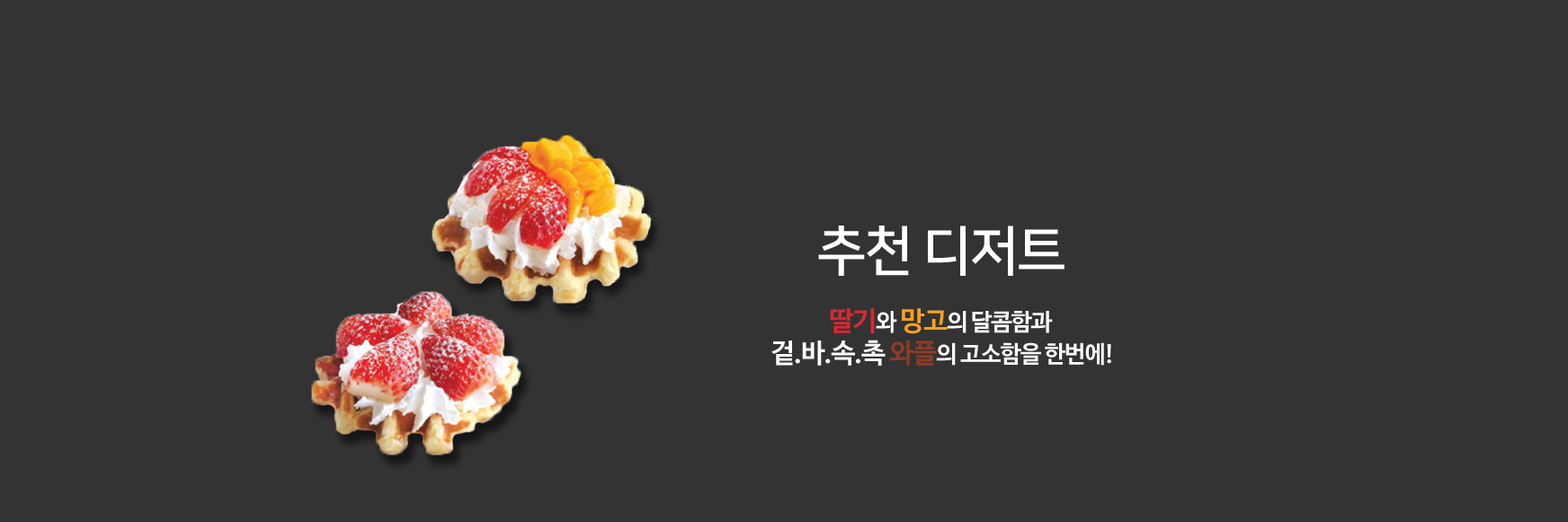
<style>
.page{position:relative;width:1568px;height:522px;background:#333333}
.page>*{position:absolute;margin:0}
.t1{font:54.2px "NanumSquareB";letter-spacing:-0.04em;color:#ffffff}
.t2{font:23.6px/32.1px "NanumBarunGothicBold";letter-spacing:-0.04em;color:#fdfdfd}
.t3{font:26.9px/32.1px "NanumBarunGothicBold";letter-spacing:-0.04em;color:#d82930}
.t4{font:23.6px/32.1px "NanumBarunGothicBold";letter-spacing:-0.04em;color:#ffffff}
.t5{font:26.9px/32.1px "NanumBarunGothicBold";letter-spacing:-0.04em;color:#faa01f}
.t6{font:26.9px/32.1px "NanumBarunGothicBold";letter-spacing:-0.04em;color:#ffffff}
.t7{font:26.9px/32.1px "NanumBarunGothicBold";letter-spacing:-0.04em;color:#8f3b26}
</style>
<div class="page">
<p class="t1" style="left:818px;top:226px;width:247px;height:50px">추천 디저트</p>
<p class="t2" style="left:771px;top:308px;width:340px;height:58px;text-align:center"><span class="t3">딸기</span><span class="t4">와 </span><span class="t5">망고</span><span class="t4">의 달콤함과 <br></span><span class="t6">겉.바.속.촉 </span><span class="t7">와플</span>의 고소함을 한번에!</p>
</div>
